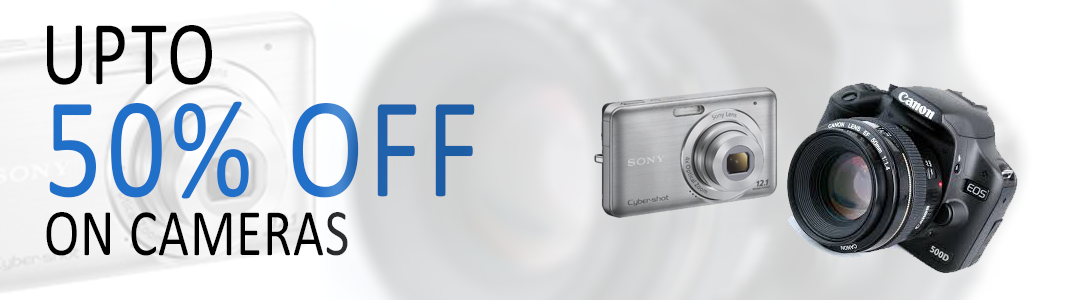
<style>
.page{position:relative;width:1080px;height:300px}
.page>*{position:absolute;margin:0}
.t1{font:92px "Calibri";letter-spacing:0.035em;color:#000000;scale:0.8 1}
.t2{font:145px "Calibri";letter-spacing:0.035em;color:#206fc9;scale:0.8 1}
.t3{font:113px "Calibri";letter-spacing:0.035em;color:#000000;scale:0.8 1}
.t4{font:67px "Calibri";letter-spacing:0.015em;color:#000000;text-transform:uppercase;scale:0.8 1}
</style>
<div class="page">
<p class="t1" style="left:47px;top:25px;width:165px;height:60px">UPTO</p>
<p class="t2" style="left:49px;top:101px;width:426px;height:98px"><span class="t3"><br></span>50% OFF</p>
<p class="t4" style="left:46px;top:212px;width:302px;height:44px">on Cameras</p>
</div>
